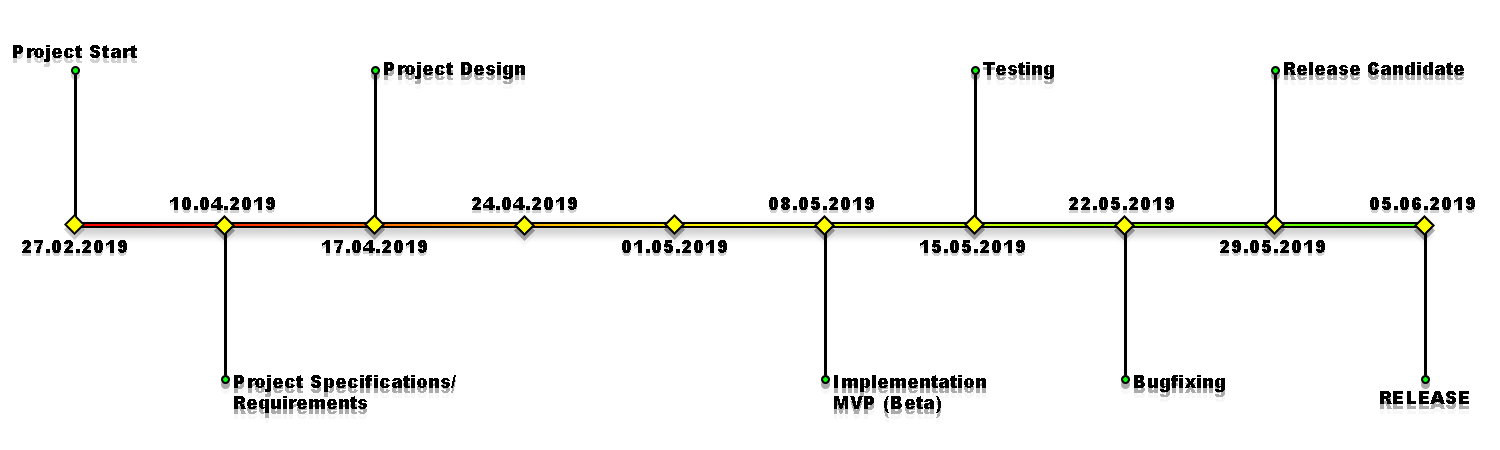
<style>
.page{position:relative;width:1500px;height:450px;background:#ffffff}
.page>*{position:absolute;margin:0}
.t1{font:18px "Arial-Black";color:#000000}
</style>
<div class="page">
<p class="t1" style="left:13px;top:45px;width:124px;height:17px">Project Start</p>
<p class="t1" style="left:384px;top:62px;width:141px;height:17px">Project Design</p>
<p class="t1" style="left:983px;top:62px;width:71px;height:17px">Testing</p>
<p class="t1" style="left:1284px;top:62px;width:180px;height:13px">Release Candidate</p>
<p class="t1" style="left:170px;top:197px;width:105px;height:13px">10.04.2019</p>
<p class="t1" style="left:472px;top:197px;width:105px;height:13px">24.04.2019</p>
<p class="t1" style="left:769px;top:197px;width:105px;height:13px">08.05.2019</p>
<p class="t1" style="left:1069px;top:197px;width:105px;height:13px">22.05.2019</p>
<p class="t1" style="left:1370px;top:197px;width:105px;height:13px">05.06.2019</p>
<p class="t1" style="left:22px;top:240px;width:105px;height:13px">27.02.2019</p>
<p class="t1" style="left:322px;top:240px;width:105px;height:13px">17.04.2019</p>
<p class="t1" style="left:622px;top:240px;width:105px;height:13px">01.05.2019</p>
<p class="t1" style="left:920px;top:240px;width:105px;height:13px">15.05.2019</p>
<p class="t1" style="left:1220px;top:240px;width:105px;height:13px">29.05.2019</p>
<p class="t1" style="left:234px;top:375px;width:222px;height:38px">Project Specifications/<br>Requirements</p>
<p class="t1" style="left:834px;top:375px;width:152px;height:38px">Implementation<br>MVP (Beta)</p>
<p class="t1" style="left:1134px;top:375px;width:91px;height:17px">Bugfixing</p>
<p class="t1" style="left:1380px;top:391px;width:89px;height:13px">RELEASE</p>
</div>
